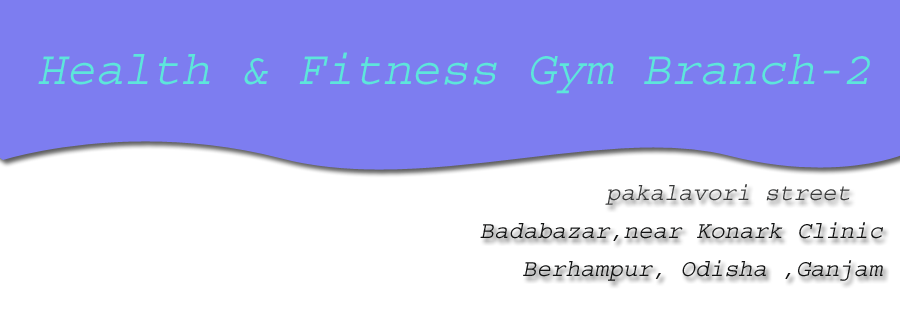
<style>
.page{position:relative;width:900px;height:320px;background:#7d7df0}
.page>*{position:absolute;margin:0}
.t1{font:48px "Courier-Oblique";color:#5de6db}
.t2{font:24px "Courier-Oblique";color:#3a3b3b}
.t3{font:24px "Courier-Oblique";color:#121313}
</style>
<div class="page">
<p class="t1" style="left:38px;top:52px;width:832px;height:42px">Health &amp; Fitness Gym Branch-2</p>
<p class="t2" style="left:605px;top:184px;width:245px;height:21px">pakalavori street</p>
<p class="t3" style="left:480px;top:222px;width:403px;height:19px">Badabazar,near Konark Clinic</p>
<p class="t3" style="left:523px;top:260px;width:360px;height:21px">Berhampur, Odisha ,Ganjam</p>
</div>
